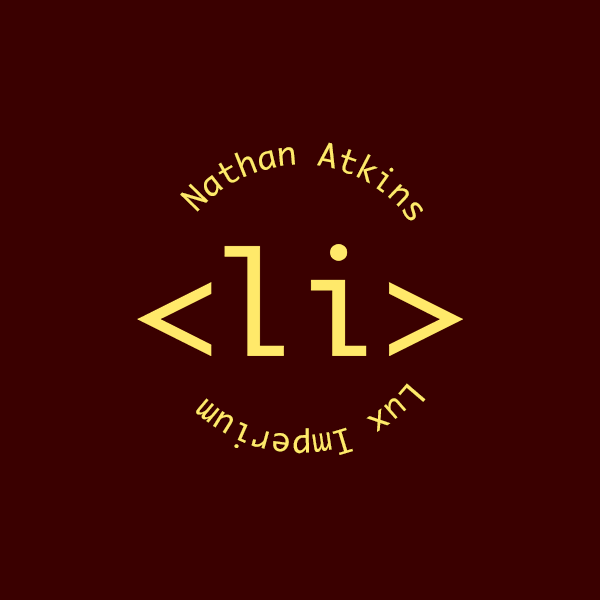
<style>
.page{position:relative;width:600px;height:600px;background:#3a0000}
.page>*{position:absolute;margin:0}
.t1{font:32px "Monaco";color:#ffe96a}
</style>
<div class="page">
<p class="t1" style="left:180px;top:142px;width:243px;height:79px;text-align:center">Nathan Atkins</p>
<p class="t1" style="left:196px;top:383px;width:230px;height:72px;text-align:center">Lux Imperium</p>
</div>
